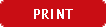
<style>
.page{position:relative;width:106px;height:27px;background:#c90d14}
.page>*{position:absolute;margin:0}
.t1{font:13.7px "LucidaSansUnicode";letter-spacing:0.1em;color:#ffffff;font-weight:bold;scale:0.8 1}
</style>
<div class="page">
<p class="t1" style="left:34px;top:9px;width:39px;height:10px">PRINT</p>
</div>
